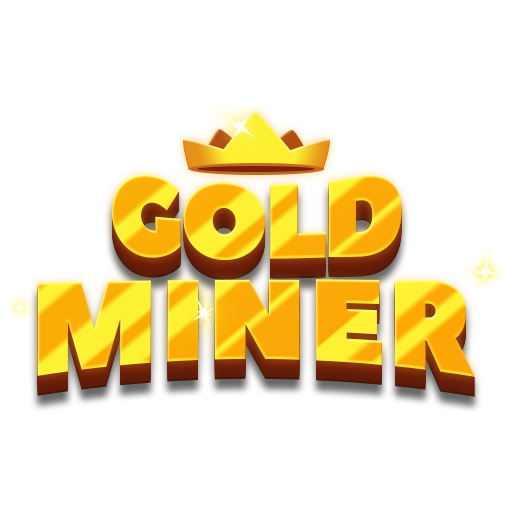
<style>
.page{position:relative;width:512px;height:512px;background:#ffffff}
.page>*{position:absolute;margin:0}
.t1{font:119.8px "PeaceSans";letter-spacing:-0.05em;scale:0.87 1}
.t2{font:134.2px "PeaceSans";letter-spacing:0.025em;scale:0.87 1}
</style>
<div class="page">
<p class="t1" style="left:111px;top:174px;width:291px;height:86px">GOLD</p>
<p class="t2" style="left:37px;top:279px;width:439px;height:98px">MINER</p>
</div>
